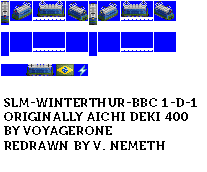
<style>
.page{position:relative;width:207px;height:172px;background:#ffffff}
.page>*{position:absolute;margin:0}
.t1{font:12px "Museo700-Regular";letter-spacing:0.075em;color:#000000;text-transform:uppercase}
</style>
<div class="page">
<p class="t1" style="left:4px;top:98px;width:193px;height:52px">SLM-Winterthur-BBC 1-D-1<br>originally aichi deki 400<br>by voyagerone<br>redrawn by v. nemeth</p>
</div>
